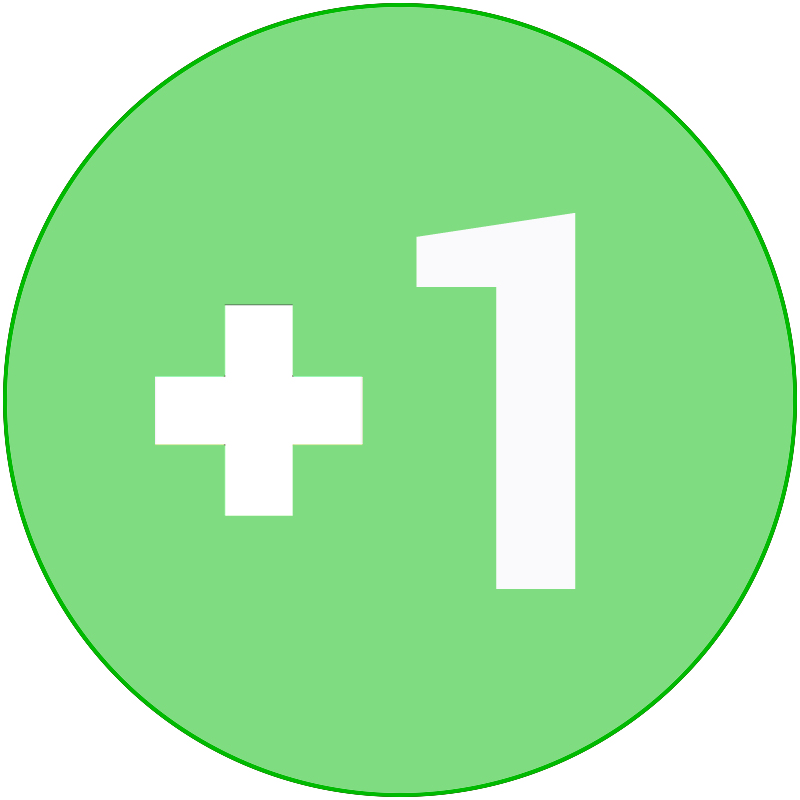
<style>
.page{position:relative;width:800px;height:800px;background:#7fdc80}
.page>*{position:absolute;margin:0}
.t1{font:724px "BankGothicBT-Medium";color:#fafafd}
</style>
<div class="page">
<p class="t1" style="left:416px;top:213px;width:160px;height:376px">1</p>
</div>
